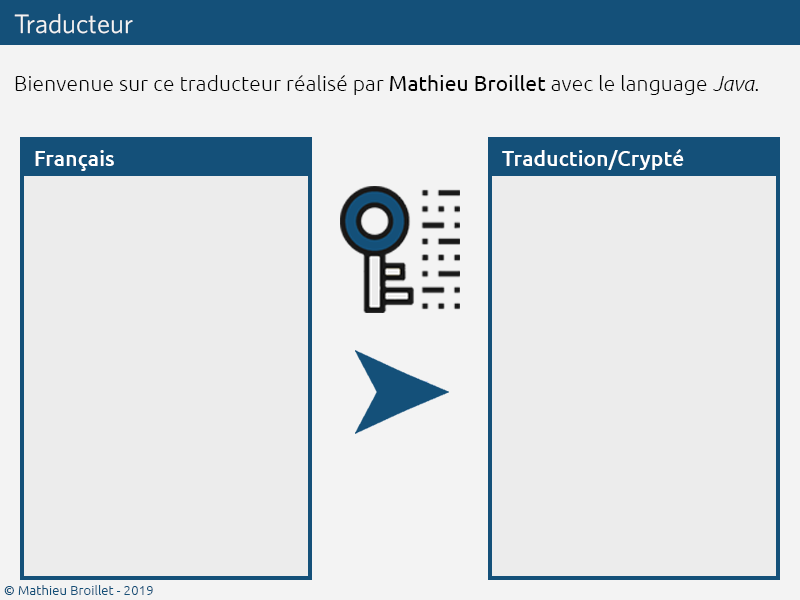
<style>
.page{position:relative;width:800px;height:600px;background:#ececec}
.page>*{position:absolute;margin:0}
.t1{font:26.7px "Whitney-Book";color:#f3f3f3}
.t2{font:21.3px "Ubuntu-Light";color:#000000}
.t3{font:21.3px "Ubuntu";color:#000000}
.t4{font:21.3px "Ubuntu-LightItalic";color:#000000}
.t5{font:21.3px "Ubuntu-Medium";color:#ffffff}
.t6{font:13.3px "Ubuntu-Light";color:#145079}
</style>
<div class="page">
<p class="t1" style="left:14px;top:13px;width:119px;height:21px">Traducteur</p>
<p class="t2" style="left:15px;top:75px;width:743px;height:20px">Bienvenue sur ce traducteur réalisé par <span class="t3">Mathieu Broillet</span> avec le language <span class="t4">Java</span>.</p>
<p class="t5" style="left:35px;top:150px;width:79px;height:21px">Français</p>
<p class="t5" style="left:502px;top:149px;width:182px;height:21px">Traduction/Crypté</p>
<p class="t6" style="left:4px;top:585px;width:149px;height:10px">© Mathieu Broillet - 2019</p>
</div>
